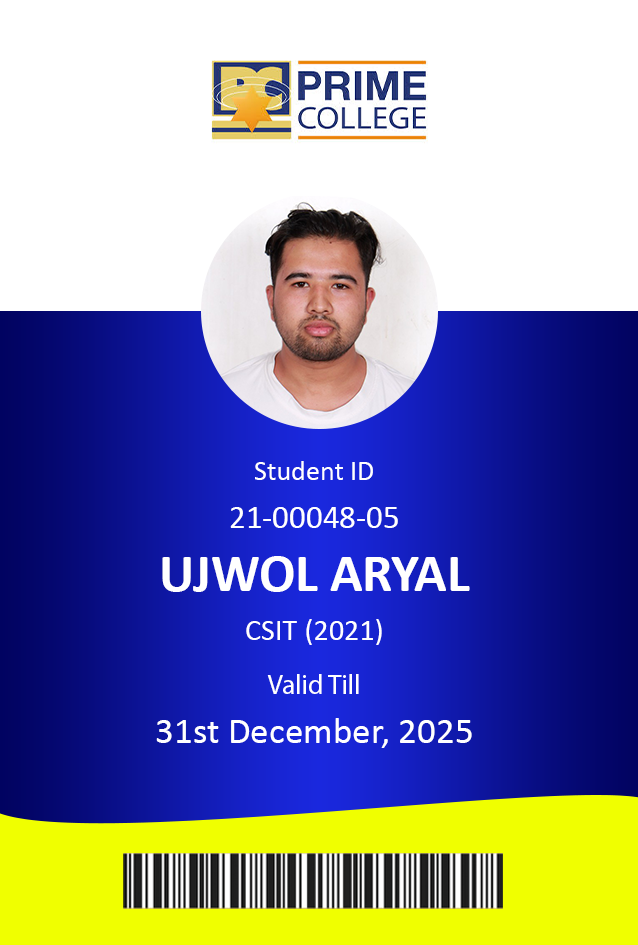
<style>
.page{position:relative;width:638px;height:945px;background:#ffffff}
.page>*{position:absolute;margin:0}
.t1{font:28.1px "Calibri";color:#ffffff}
.t2{font:33px "Calibri";color:#ffffff}
.t3{font:53.5px "Calibri-Bold";color:#ffffff}
.t4{font:30.2px "Calibri";color:#ffffff}
.t5{font:27.3px "MyriadPro-Regular";color:#ffffff}
.t6{font:37.2px "Calibri";color:#ffffff}
</style>
<div class="page">
<p class="t1" style="left:255px;top:461px;width:118px;height:19px">Student ID</p>
<p class="t2" style="left:230px;top:507px;width:168px;height:21px">21-00048-05</p>
<p class="t3" style="left:162px;top:556px;width:308px;height:36px">UJWOL ARYAL</p>
<p class="t4" style="left:246px;top:619px;width:136px;height:26px">CSIT (2021)</p>
<p class="t5" style="left:267px;top:674px;width:92px;height:20px">Valid Till</p>
<p class="t6" style="left:156px;top:718px;width:316px;height:30px">31st December, 2025</p>
</div>
